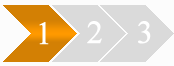
<style>
.page{position:relative;width:174px;height:66px;background:#dadada}
.page>*{position:absolute;margin:0}
.t1{font:32px "TimesNewRomanPSMT";color:#ffffff;font-weight:bold}
</style>
<div class="page">
<p class="t1" style="left:39px;top:22px;width:10px;height:23px">1</p>
<p class="t1" style="left:87px;top:21px;width:15px;height:23px">2</p>
<p class="t1" style="left:138px;top:21px;width:13px;height:23px">3</p>
</div>
